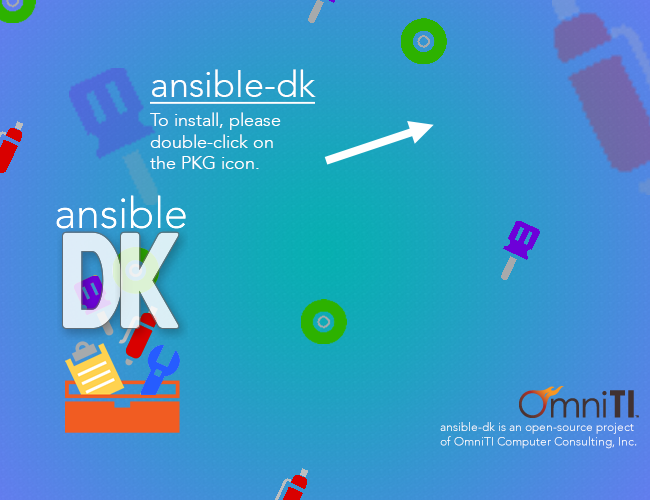
<style>
.page{position:relative;width:650px;height:500px}
.page>*{position:absolute;margin:0}
.t1{font:36px "Avenir-Light";color:#ffffff;text-decoration:underline}
.t2{font:18px "Avenir-Light";color:#ffffff}
.t3{font:12px "Avenir-Light";color:#ffffff}
</style>
<div class="page">
<p class="t1" style="left:150px;top:69px;width:166px;height:35px">ansible-dk</p>
<p class="t2" style="left:150px;top:112px;width:131px;height:57px">To install, please <br>double-click on <br>the PKG icon.</p>
<p class="t3" style="left:440px;top:422px;width:197px;height:27px;text-align:right">ansible-dk is an open-source project <br>of OmniTI Computer Consulting, Inc.</p>
</div>
